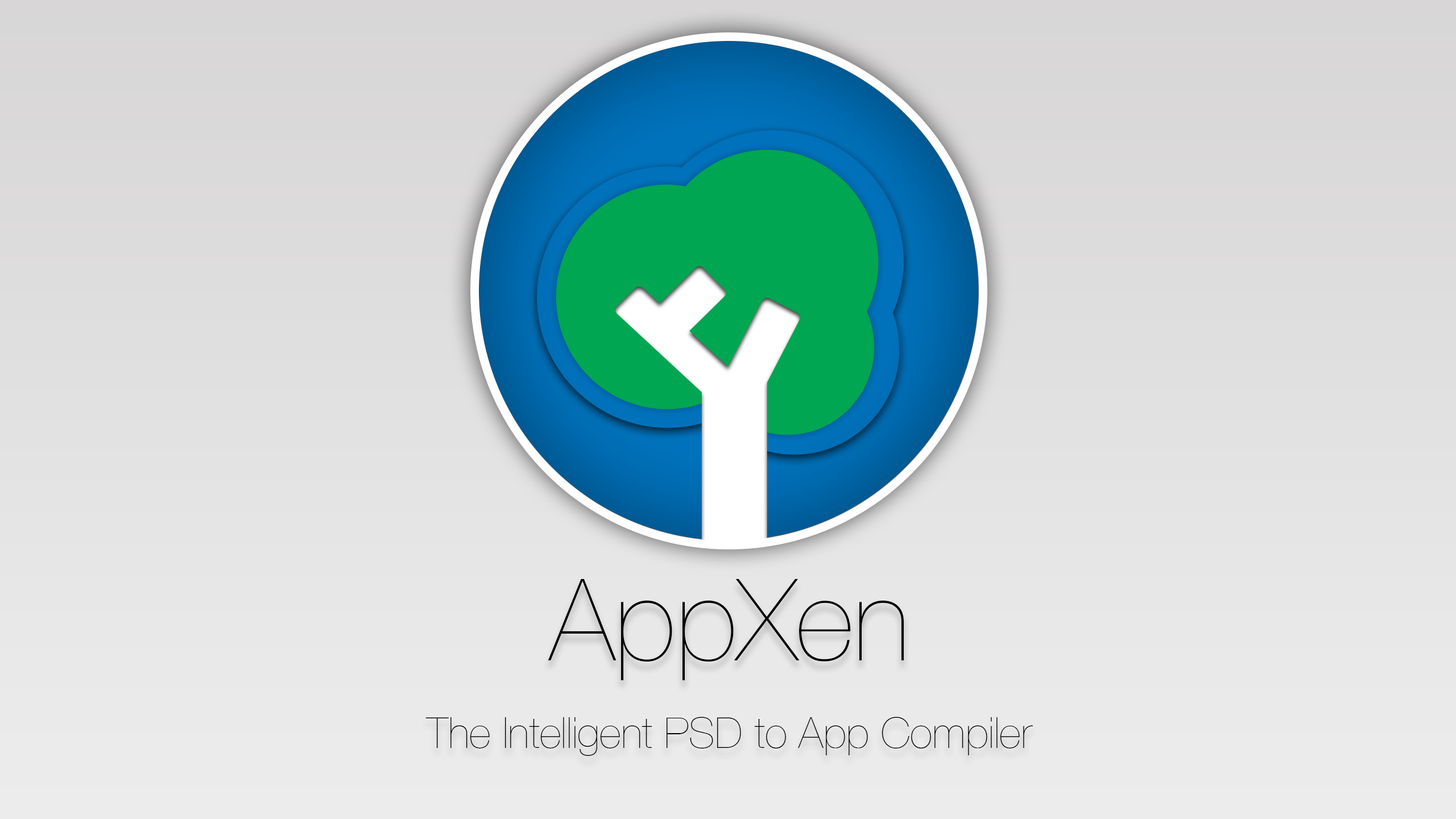
<style>
.page{position:relative;width:1456px;height:819px}
.page>*{position:absolute;margin:0}
.t1{font:113.7px "HelveticaNeue-UltraLight";color:#000000}
.t2{font:42.7px "HelveticaNeue-UltraLight";color:#000000}
</style>
<div class="page">
<p class="t1" style="left:548px;top:579px;width:356px;height:101px">AppXen</p>
<p class="t2" style="left:425px;top:717px;width:608px;height:39px">The Intelligent PSD to App Compiler</p>
</div>
